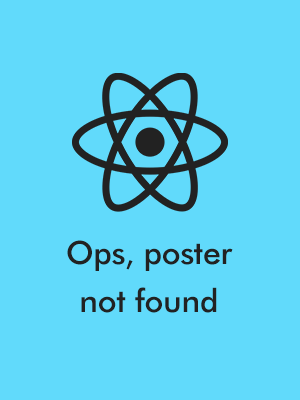
<style>
.page{position:relative;width:300px;height:400px;background:#61dafb}
.page>*{position:absolute;margin:0}
.t1{font:32px/48px "FuturaBT-Medium";letter-spacing:-0.01em;color:#222222}
</style>
<div class="page">
<p class="t1" style="left:67px;top:240px;width:166px;height:73px;text-align:center">Ops, poster<br>not found</p>
</div>
